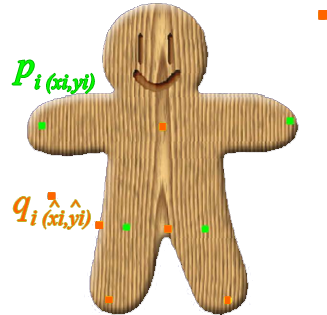
<style>
.page{position:relative;width:327px;height:315px;background:#ffffff}
.page>*{position:absolute;margin:0}
.t1{font:36px "TimesNewRomanPS-ItalicMT";color:#02fd00}
.t2{font:36px "TimesNewRomanPS-ItalicMT";color:#ff6400}
</style>
<div class="page">
<p class="t1" style="left:12px;top:60px;width:82px;height:34px">pi (xi,yi)</p>
<p class="t2" style="left:13px;top:197px;width:77px;height:32px">qi (xi,yi)</p>
<p class="t2" style="left:50px;top:200px;width:9px;height:7px">^</p>
<p class="t2" style="left:71px;top:200px;width:9px;height:7px">^</p>
</div>
